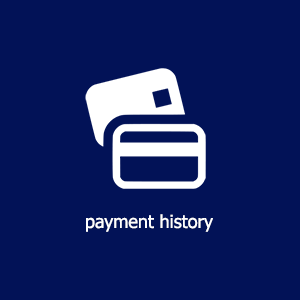
<style>
.page{position:relative;width:300px;height:300px;background:#021257}
.page>*{position:absolute;margin:0}
.t1{font:18px "Tahoma";color:#ffffff}
</style>
<div class="page">
<p class="t1" style="left:86px;top:214px;width:127px;height:18px">payment history</p>
</div>
